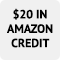
<style>
.page{position:relative;width:60px;height:60px;background:#f0f0f0}
.page>*{position:absolute;margin:0}
.t1{font:12px "PTSans-Bold";color:#000000;text-transform:uppercase}
</style>
<div class="page">
<p class="t1" style="left:7px;top:8px;width:46px;height:40px;text-align:center">$20 in<br>amazon<br>credit</p>
</div>
